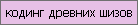
<style>
.page{position:relative;width:138px;height:25px;background:#e7c0e6}
.page>*{position:absolute;margin:0}
.t1{font:12px "Tahoma";color:#000000}
</style>
<div class="page">
<p class="t1" style="left:6px;top:10px;width:126px;height:9px">кодинг древних шизов</p>
</div>
